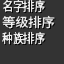
<style>
.page{position:relative;width:64px;height:64px;background:#333333}
.page>*{position:absolute;margin:0}
.t1{font:13px/16px "SourceHanSansSC-Regular";color:#e8e8e8;scale:0.82 1}
.t2{font:13px/16px "SourceHanSansSC-Regular";color:#e8e8e8}
</style>
<div class="page">
<p class="t1" style="left:2px;top:0px;width:53px;height:45px">名字排序<br><span class="t2">等级排序<br></span>种族排序</p>
</div>
